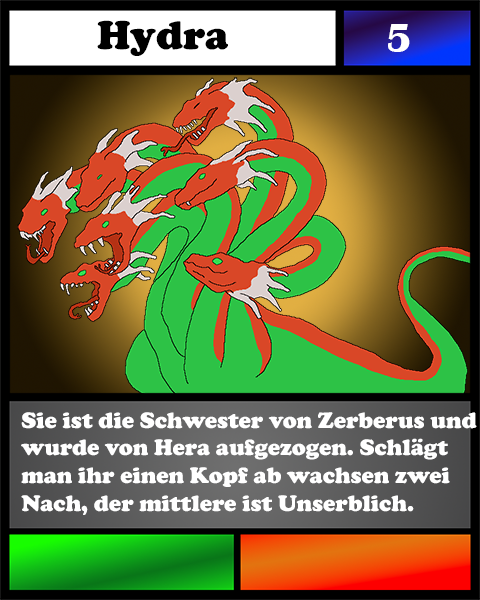
<style>
.page{position:relative;width:480px;height:600px}
.page>*{position:absolute;margin:0}
.t1{font:41.7px "CooperBlack";color:#000000}
.t2{font:41.7px "BritannicBold";color:#ffffff}
.t3{font:23.1px "CooperBlack";color:#ffffff}
</style>
<div class="page">
<p class="t1" style="left:97px;top:20px;width:131px;height:36px">Hydra</p>
<p class="t2" style="left:388px;top:24px;width:22px;height:28px">5</p>
<p class="t3" style="left:21px;top:412px;width:456px;height:103px">Sie ist die Schwester von Zerberus und wurde von Hera aufgezogen. Schlägt <br>man ihr einen Kopf ab wachsen zwei Nach, der mittlere ist Unserblich.</p>
</div>
